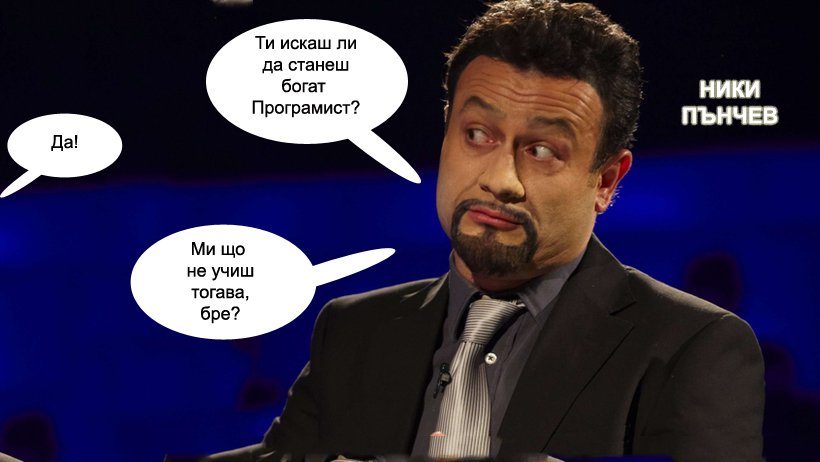
<style>
.page{position:relative;width:820px;height:462px}
.page>*{position:absolute;margin:0}
.t1{font:17.9px "ArialMT";color:#040101}
.t2{font:21.9px "Arial-BoldMT";color:#ffffff}
.t3{font:17.9px "ArialMT";color:#000000}
</style>
<div class="page">
<p class="t1" style="left:252px;top:36px;width:108px;height:82px;text-align:center">Ти искаш ли<br>да станеш<br>богат <br>Програмист?</p>
<p class="t2" style="left:683px;top:81px;width:95px;height:43px;text-align:center">НИКИ<br>ПЪНЧЕВ</p>
<p class="t1" style="left:51px;top:135px;width:27px;height:16px">Да!</p>
<p class="t3" style="left:187px;top:242px;width:67px;height:82px;text-align:center">Ми що<br> не учиш<br> тогава,<br> бре?</p>
</div>
